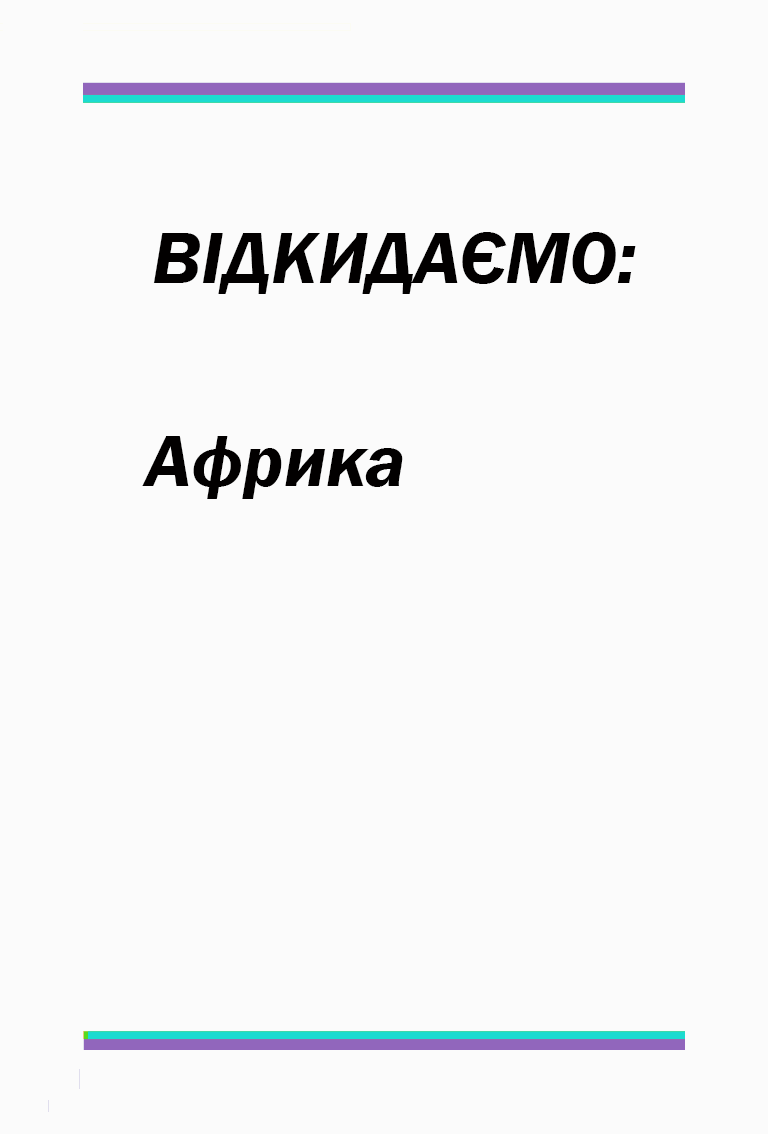
<style>
.page{position:relative;width:768px;height:1134px;background:#fbfbfb}
.page>*{position:absolute;margin:0}
.t1{font:75px "FranklinGothic-DemiItalic";color:#020000}
</style>
<div class="page">
<p class="t1" style="left:153px;top:232px;width:483px;height:62px">ВІДКИДАЄМО:</p>
<p class="t1" style="left:142px;top:436px;width:261px;height:63px">Африка</p>
</div>
